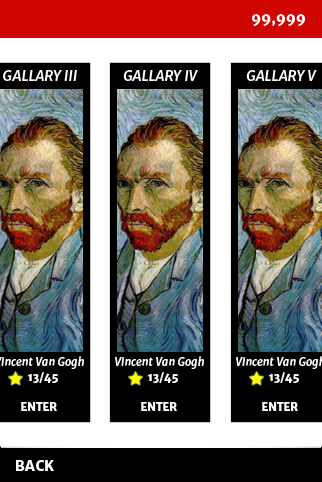
<style>
.page{position:relative;width:322px;height:482px;background:#000000}
.page>*{position:absolute;margin:0}
.t1{font:14px "MerriweatherSans-ExtraBold";color:#ffffff}
.t2{font:14px "MerriweatherSans-BoldItalic";color:#ffffff}
.t3{font:11px "MerriweatherSans-BoldItalic";color:#ffffff}
.t4{font:11px "MerriweatherSans-ExtraBold";color:#ffffff}
</style>
<div class="page">
<p class="t1" style="left:252px;top:14px;width:53px;height:12px">99,999</p>
<p class="t2" style="left:3px;top:70px;width:74px;height:11px">GALLARY III</p>
<p class="t2" style="left:123px;top:70px;width:75px;height:11px">GALLARY IV</p>
<p class="t2" style="left:246px;top:70px;width:71px;height:11px">GALLARY V</p>
<p class="t3" style="left:115px;top:356px;width:89px;height:13px">Vincent Van Gogh</p>
<p class="t4" style="left:28px;top:372px;width:30px;height:11px">13/45</p>
<p class="t4" style="left:148px;top:372px;width:30px;height:11px">13/45</p>
<p class="t4" style="left:269px;top:372px;width:30px;height:11px">13/45</p>
<p class="t4" style="left:21px;top:402px;width:36px;height:9px">ENTER</p>
<p class="t4" style="left:141px;top:402px;width:36px;height:9px">ENTER</p>
<p class="t4" style="left:262px;top:402px;width:36px;height:9px">ENTER</p>
<p class="t1" style="left:16px;top:460px;width:38px;height:11px">BACK</p>
</div>
